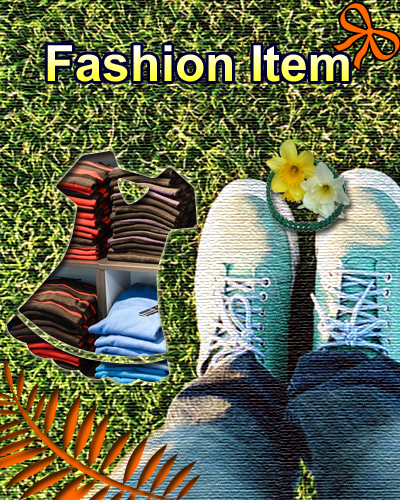
<style>
.page{position:relative;width:400px;height:500px}
.page>*{position:absolute;margin:0}
.t1{font:50px "Arial-BoldMT"}
</style>
<div class="page">
<p class="t1" style="left:47px;top:45px;width:302px;height:37px">Fashion Item</p>
</div>
